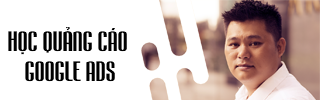
<style>
.page{position:relative;width:320px;height:100px;background:#ffffff}
.page>*{position:absolute;margin:0}
.t1{font:25px "UTM-Mabella";color:#000000}
</style>
<div class="page">
<p class="t1" style="left:8px;top:27px;width:119px;height:55px;text-align:center">HỌC QUẢNG CÁO <br>GOOGLE ADS</p>
</div>
